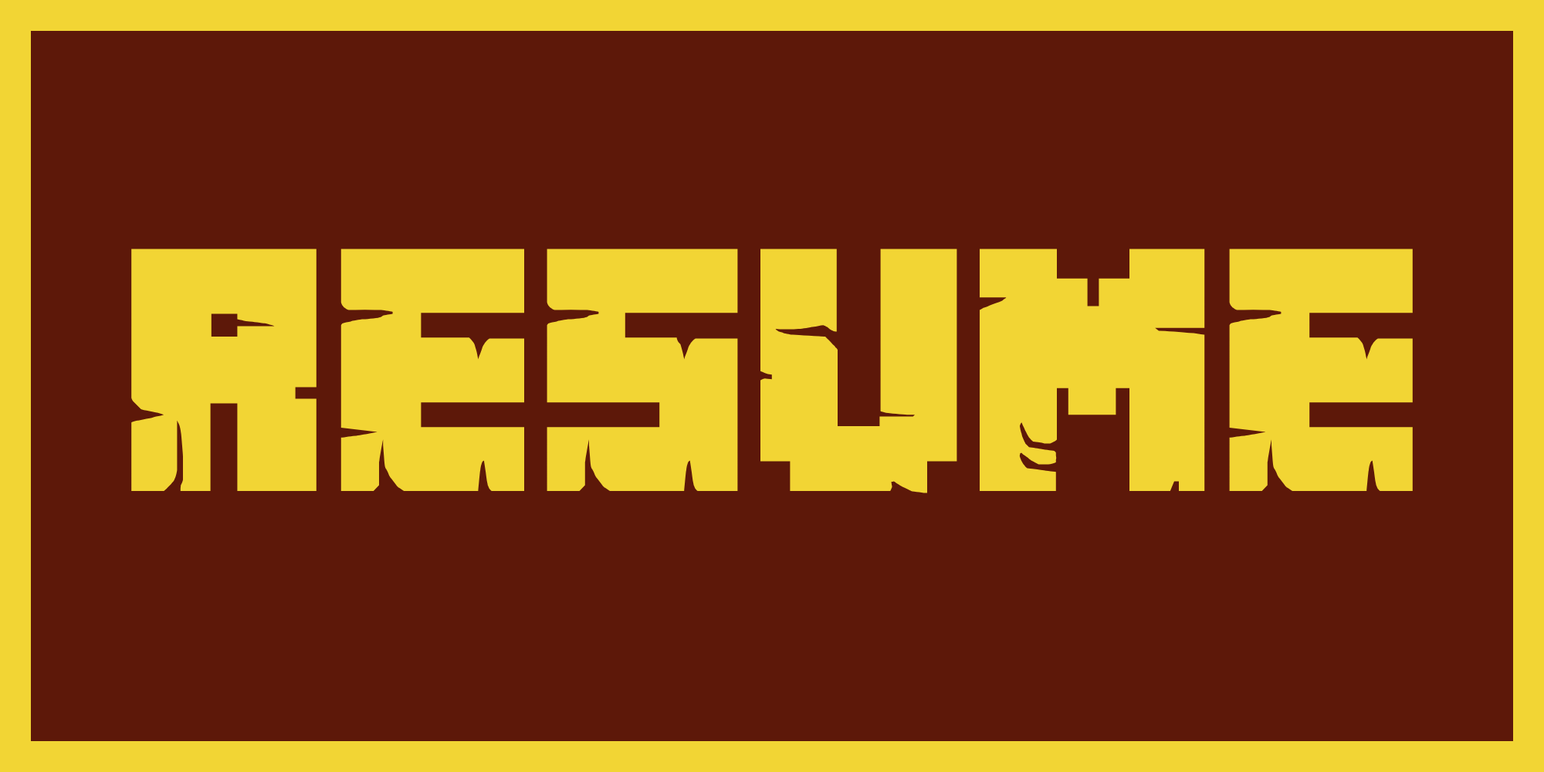
<style>
.page{position:relative;width:1544px;height:772px;background:#5d1809}
.page>*{position:absolute;margin:0}
.t1{font:308.9px "MinecrafterAlt";color:#f2d534}
</style>
<div class="page">
<p class="t1" style="left:131px;top:249px;width:1282px;height:244px">RESUME</p>
</div>
